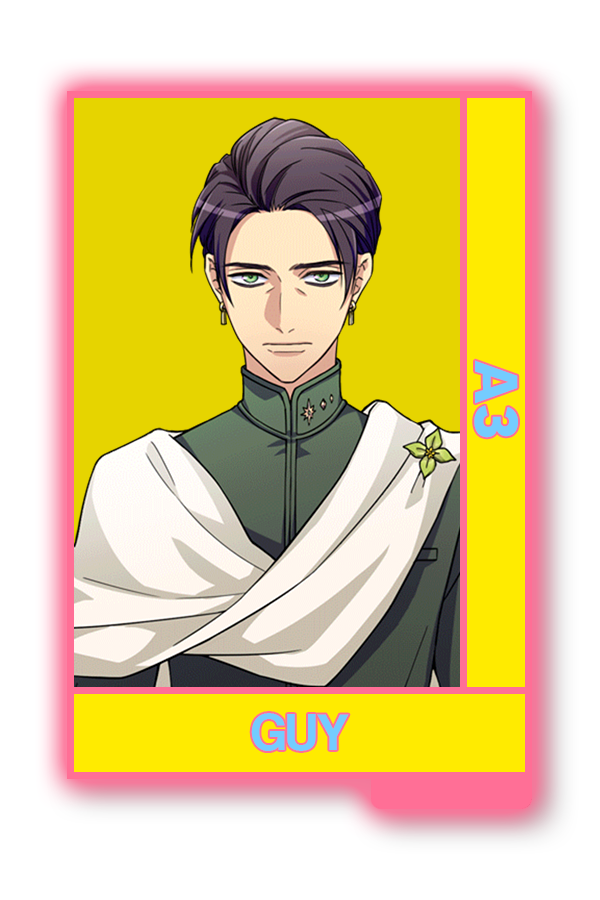
<style>
.page{position:relative;width:600px;height:900px;background:#ffffff}
.page>*{position:absolute;margin:0}
.t1{font:60.5px "MADETOMMY-Bold";color:#74ccff}
.t2{font:53.2px "CoolveticaRg-Regular";color:#74ccff}
</style>
<div class="page">
<p class="t1" style="left:474px;top:360px;width:44px;height:78px;rotate:90deg">A3</p>
<p class="t2" style="left:251px;top:713px;width:98px;height:38px">GUY</p>
</div>
